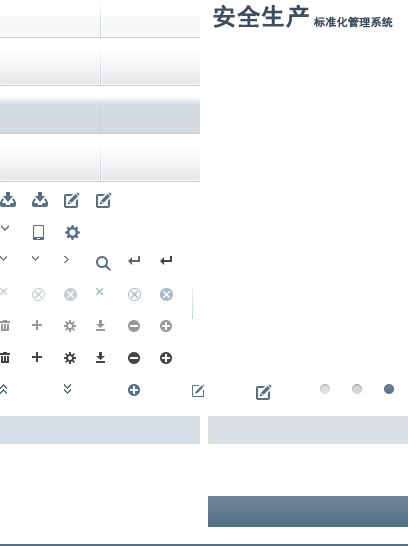
<style>
.page{position:relative;width:408px;height:546px;background:#ffffff}
.page>*{position:absolute;margin:0}
.t1{font:24px "SimHei";color:#3d4f5f;font-weight:bold}
.t2{font:11px "SimHei";color:#3d4f5f;font-weight:bold}
</style>
<div class="page">
<p class="t1" style="left:213px;top:4px;width:96px;height:24px">安全生产</p>
<p class="t2" style="left:314px;top:16px;width:79px;height:12px">标准化管理系统</p>
</div>
